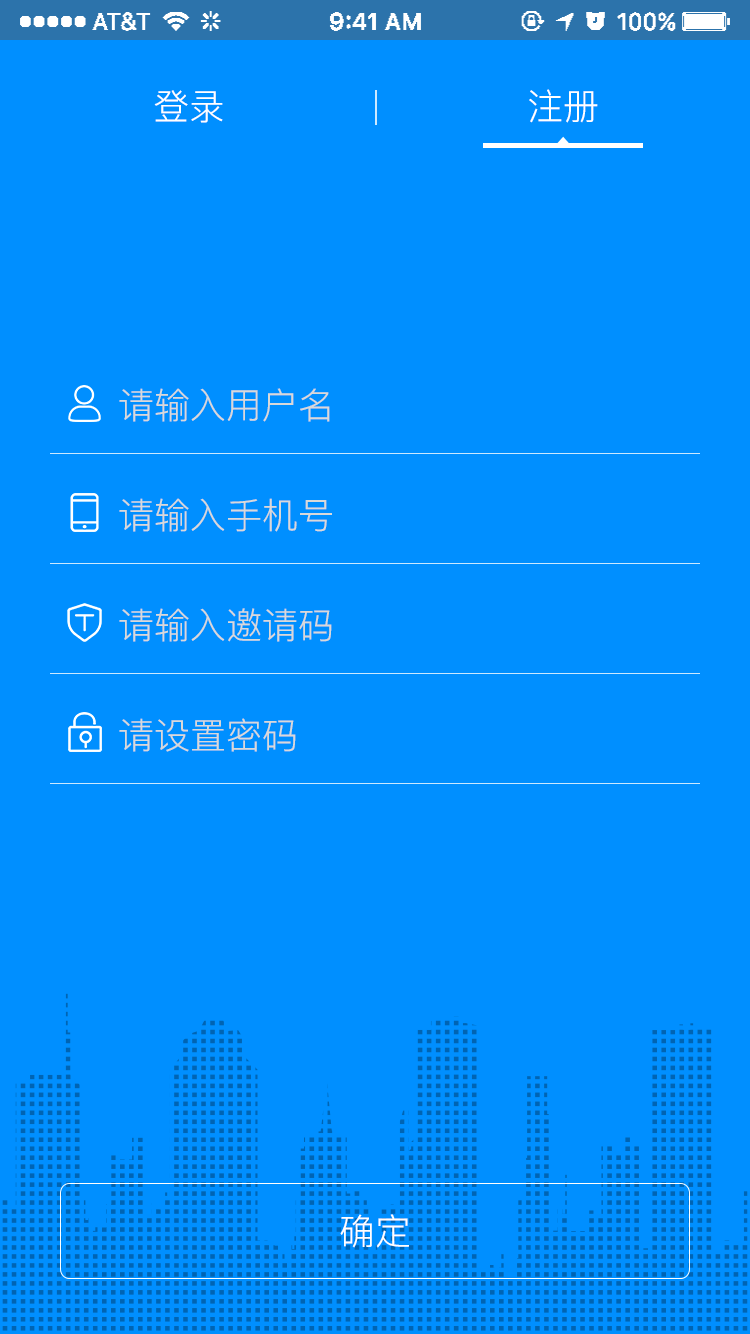
<style>
.page{position:relative;width:750px;height:1334px;background:#008fff}
.page>*{position:absolute;margin:0}
.t1{font:36px "PingFang-SC-Regular";color:#ffffff}
.t2{font:36px "PingFang-SC-Regular";color:#d9d9d9}
</style>
<div class="page">
<p class="t1" style="left:529px;top:89px;width:69px;height:34px">注册</p>
<p class="t1" style="left:154px;top:90px;width:69px;height:33px">登录</p>
<p class="t2" style="left:119px;top:388px;width:211px;height:34px">请输入用户名</p>
<p class="t2" style="left:119px;top:498px;width:213px;height:34px">请输入手机号</p>
<p class="t2" style="left:119px;top:608px;width:213px;height:34px">请输入邀请码</p>
<p class="t2" style="left:119px;top:718px;width:177px;height:34px">请设置密码</p>
<p class="t1" style="left:340px;top:1214px;width:69px;height:34px">确定</p>
</div>
